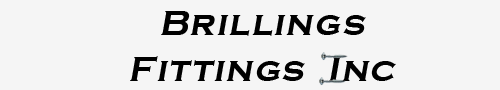
<style>
.page{position:relative;width:500px;height:90px;background:#f5f5f5}
.page>*{position:absolute;margin:0}
.t1{font:36px "CopperplateGothic-Bold";letter-spacing:0.05em;color:#000000;font-style:italic}
</style>
<div class="page">
<p class="t1" style="left:130px;top:11px;width:266px;height:70px;text-align:center">Brillings<br>Fittings  Inc</p>
</div>
